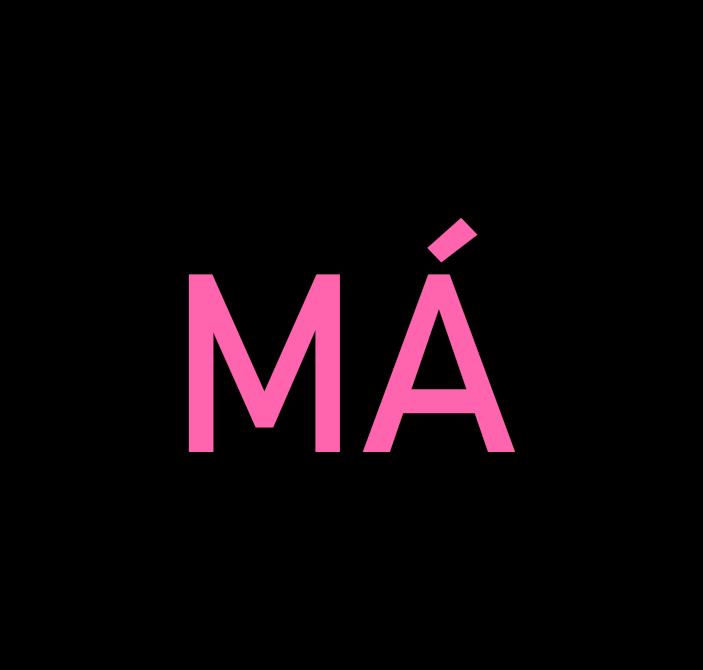
<style>
.page{position:relative;width:703px;height:670px;background:#000000}
.page>*{position:absolute;margin:0}
.t1{font:250px "Bahnschrift";letter-spacing:-0.005em;color:#ff64ae}
</style>
<div class="page">
<p class="t1" style="left:188px;top:217px;width:327px;height:235px">MÁ</p>
</div>
